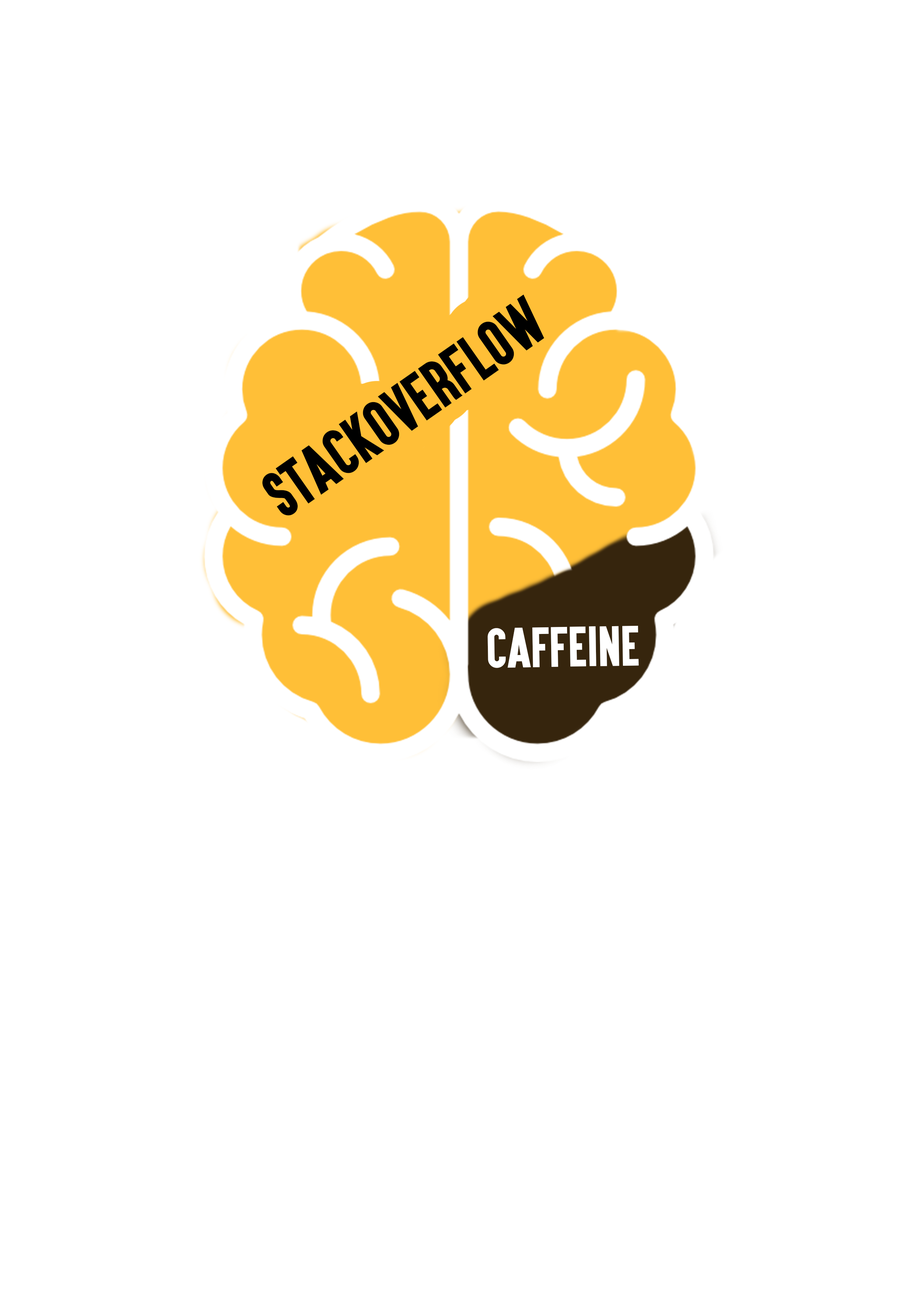
<style>
.page{position:relative;width:918px;height:1299px;background:#ffffff}
.page>*{position:absolute;margin:0}
.t1{font:56px "Aku&Kamu";color:#000000}
.t2{font:46.8px "Aku&Kamu";color:#ffffff}
</style>
<div class="page">
<p class="t1" style="left:262px;top:294px;width:282px;height:221px;rotate:-35deg">Stackoverflow</p>
<p class="t2" style="left:488px;top:625px;width:151px;height:43px;rotate:-1deg">Caffeine</p>
</div>
